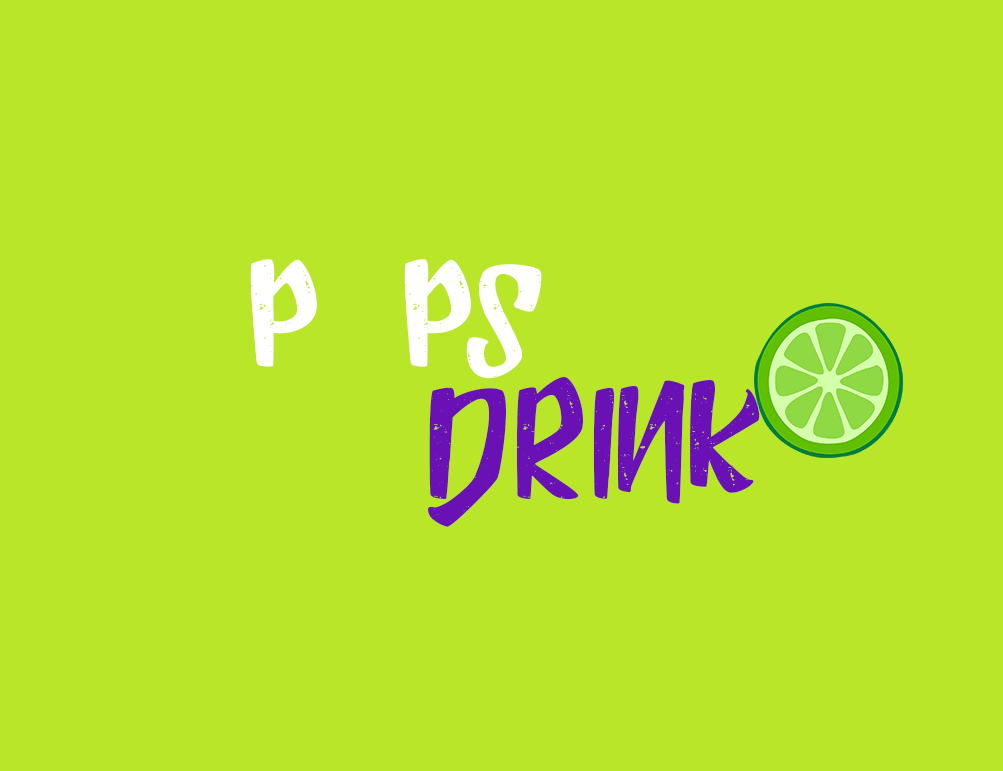
<style>
.page{position:relative;width:1003px;height:771px;background:#bae62a}
.page>*{position:absolute;margin:0}
.t1{font:150px "HumblleRoughtAllCaps";color:#ffffff}
.t2{font:150px "HumblleRoughtAllCaps";color:#6911b4}
</style>
<div class="page">
<p class="t1" style="left:250px;top:259px;width:292px;height:120px">p   PS</p>
<p class="t2" style="left:427px;top:377px;width:333px;height:150px">DRINK</p>
</div>
